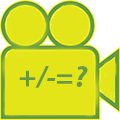
<style>
.page{position:relative;width:120px;height:120px;background:#e3e519}
.page>*{position:absolute;margin:0}
.t1{font:30px "MyriadPro-BoldIt";color:#659b46}
</style>
<div class="page">
<p class="t1" style="left:19px;top:66px;width:69px;height:22px">+/-=?</p>
</div>
